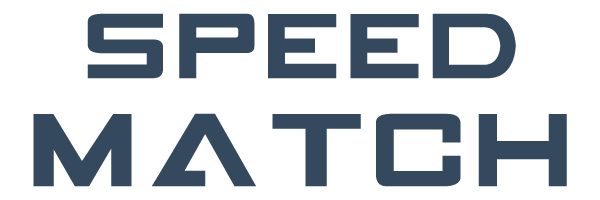
<style>
.page{position:relative;width:600px;height:200px;background:#ffffff}
.page>*{position:absolute;margin:0}
.t1{font:80px "GAMECUBENDualSet";color:#34495e}
.t2{font:90px "GAMECUBENDualSet";color:#34495e}
</style>
<div class="page">
<p class="t1" style="left:33px;top:13px;width:534px;height:174px;text-align:center">SPEED<br><span class="t2">MATCH</span></p>
</div>
